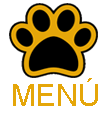
<style>
.page{position:relative;width:106px;height:114px;background:#ffffff}
.page>*{position:absolute;margin:0}
.t1{font:30px "ArialMT";color:#e5a609}
</style>
<div class="page">
<p class="t1" style="left:13px;top:78px;width:85px;height:28px">MENÚ</p>
</div>
